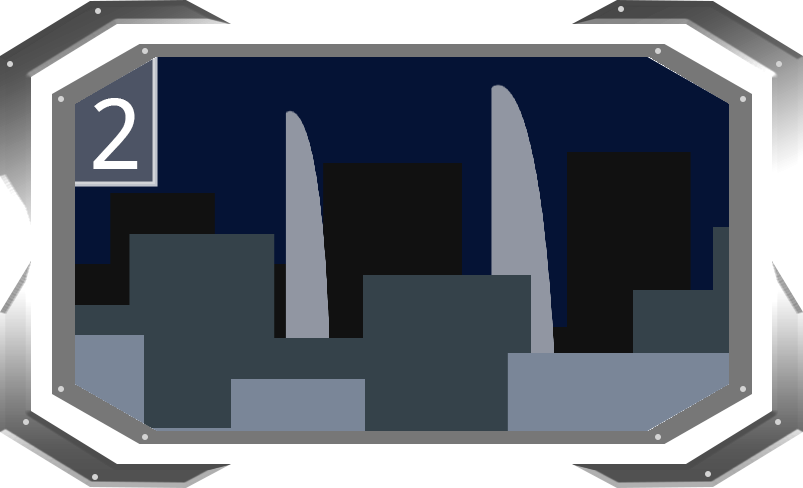
<style>
.page{position:relative;width:803px;height:488px;background:#ffffff}
.page>*{position:absolute;margin:0}
.t1{font:97.8px "NotoMono";letter-spacing:0.1em;color:#ffffff}
</style>
<div class="page">
<p class="t1" style="left:93px;top:98px;width:45px;height:71px">2</p>
</div>
